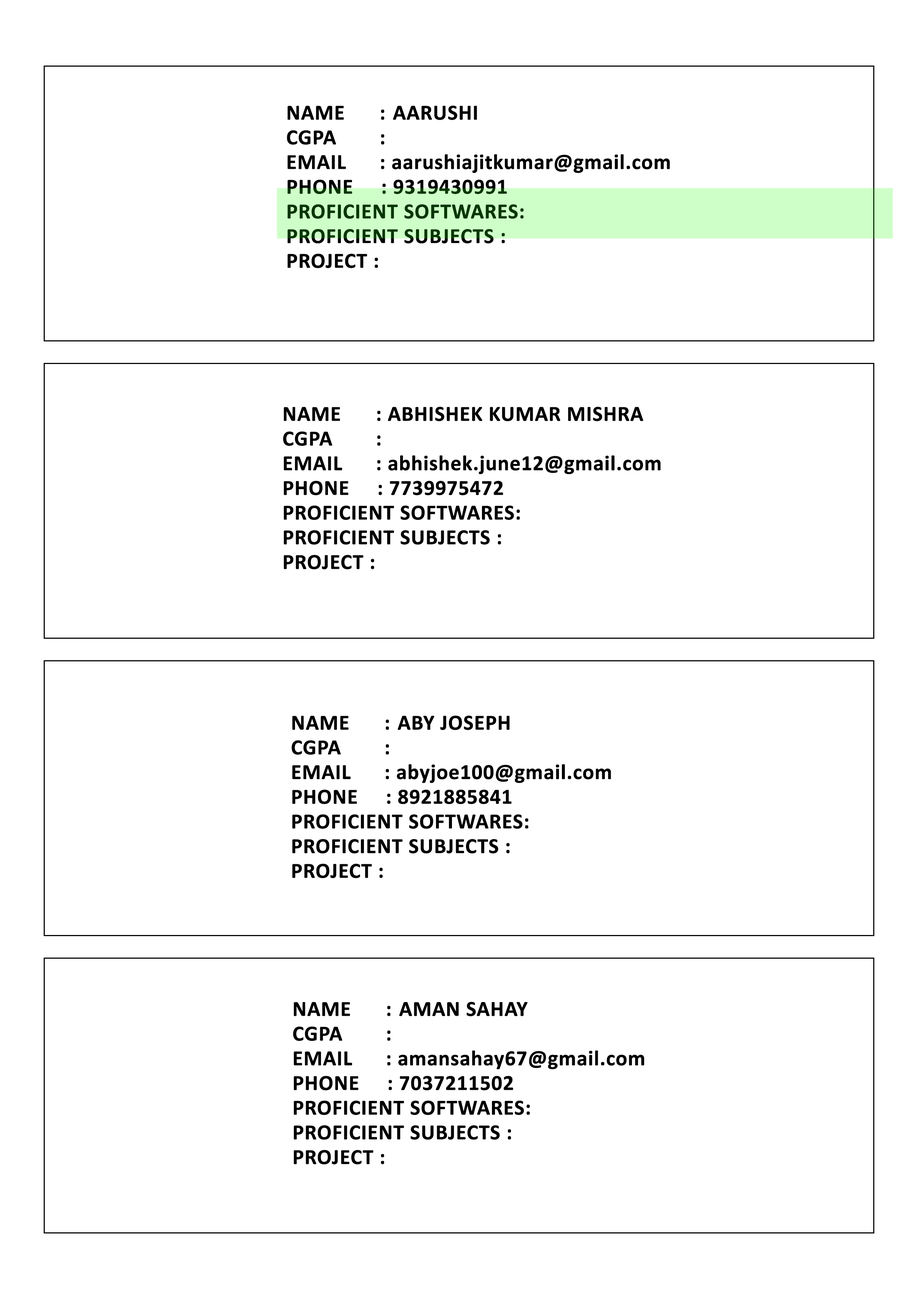
<style>
.page{position:relative;width:918px;height:1299px;background:#ffffff}
.page>*{position:absolute;margin:0}
.t1{font:21.6px/24.7px "Calibri-Bold";color:#000000;font-weight:bold}
</style>
<div class="page">
<p class="t1" style="left:287px;top:106px;width:383px;height:162px">NAME   : AARUSHI<br>CGPA    :   <br>EMAIL      : aarushiajitkumar@gmail.com<br>PHONE     : 9319430991<br>PROFICIENT SOFTWARES:<br>PROFICIENT SUBJECTS :<br>PROJECT :</p>
<p class="t1" style="left:283px;top:407px;width:378px;height:162px">NAME   : ABHISHEK KUMAR MISHRA <br>CGPA    :   <br>EMAIL      : abhishek.june12@gmail.com<br>PHONE     : 7739975472<br>PROFICIENT SOFTWARES:<br>PROFICIENT SUBJECTS :<br>PROJECT :</p>
<p class="t1" style="left:292px;top:715px;width:319px;height:163px">NAME   : ABY JOSEPH<br>CGPA    :   <br>EMAIL      : abyjoe100@gmail.com<br>PHONE     : 8921885841<br>PROFICIENT SOFTWARES:<br>PROFICIENT SUBJECTS :<br>PROJECT :</p>
<p class="t1" style="left:293px;top:1001px;width:352px;height:163px">NAME   : AMAN SAHAY<br>CGPA    :   <br>EMAIL      : amansahay67@gmail.com<br>PHONE     : 7037211502<br>PROFICIENT SOFTWARES:<br>PROFICIENT SUBJECTS :<br>PROJECT :</p>
</div>
